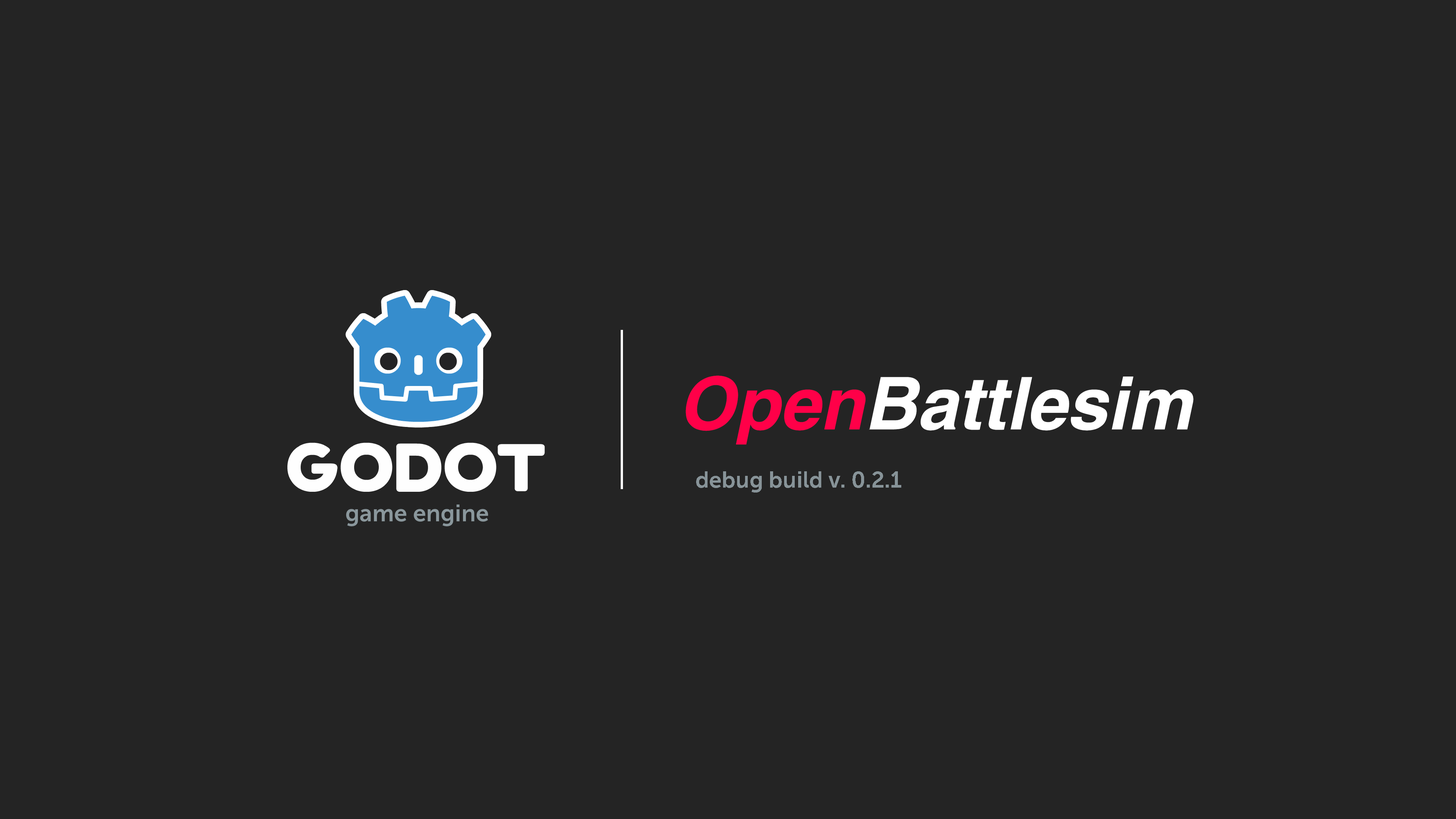
<style>
.page{position:relative;width:1456px;height:819px;background:#242424}
.page>*{position:absolute;margin:0}
.t1{font:72.8px "AGHlvCyrillicBold-ItalicA";color:#ffffff}
.t2{font:72.8px "AGHlvCyrillicBold-ItalicA";color:#ff0048}
.t3{font:22.7px "MuseoSans-700";color:#879398}
</style>
<div class="page">
<p class="t1" style="left:686px;top:375px;width:508px;height:70px"><span class="t2">Open</span>Battlesim</p>
<p class="t3" style="left:696px;top:471px;width:205px;height:22px">debug build v. 0.2.1</p>
</div>
